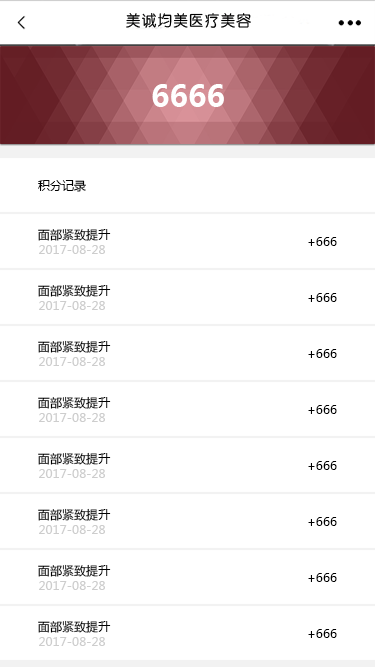
<style>
.page{position:relative;width:375px;height:667px;background:#ffffff}
.page>*{position:absolute;margin:0}
.t1{font:30px "MicrosoftYaHei-Bold";letter-spacing:0.005em;color:#ffffff}
.t2{font:12px "MicrosoftYaHei";letter-spacing:0.005em;color:#000000}
.t3{font:12px "MicrosoftYaHei";letter-spacing:0.005em;color:#cdcdcd}
</style>
<div class="page">
<p class="t1" style="left:152px;top:84px;width:72px;height:23px">6666</p>
<p class="t2" style="left:38px;top:180px;width:48px;height:12px">积分记录</p>
<p class="t2" style="left:38px;top:228px;width:73px;height:13px">面部紧致提升</p>
<p class="t3" style="left:39px;top:245px;width:66px;height:9px">2017-08-28</p>
<p class="t2" style="left:308px;top:237px;width:29px;height:9px">+666</p>
<p class="t2" style="left:38px;top:284px;width:73px;height:13px">面部紧致提升</p>
<p class="t2" style="left:308px;top:293px;width:29px;height:9px">+666</p>
<p class="t3" style="left:39px;top:301px;width:66px;height:9px">2017-08-28</p>
<p class="t2" style="left:38px;top:340px;width:73px;height:13px">面部紧致提升</p>
<p class="t2" style="left:308px;top:349px;width:29px;height:9px">+666</p>
<p class="t3" style="left:39px;top:357px;width:66px;height:9px">2017-08-28</p>
<p class="t2" style="left:38px;top:396px;width:73px;height:13px">面部紧致提升</p>
<p class="t3" style="left:39px;top:413px;width:66px;height:9px">2017-08-28</p>
<p class="t2" style="left:308px;top:405px;width:29px;height:9px">+666</p>
<p class="t2" style="left:38px;top:452px;width:73px;height:13px">面部紧致提升</p>
<p class="t2" style="left:308px;top:461px;width:29px;height:9px">+666</p>
<p class="t3" style="left:39px;top:469px;width:66px;height:9px">2017-08-28</p>
<p class="t2" style="left:38px;top:508px;width:73px;height:13px">面部紧致提升</p>
<p class="t2" style="left:308px;top:517px;width:29px;height:9px">+666</p>
<p class="t3" style="left:39px;top:525px;width:66px;height:9px">2017-08-28</p>
<p class="t2" style="left:38px;top:564px;width:73px;height:13px">面部紧致提升</p>
<p class="t3" style="left:39px;top:581px;width:66px;height:9px">2017-08-28</p>
<p class="t2" style="left:308px;top:573px;width:29px;height:9px">+666</p>
<p class="t2" style="left:38px;top:620px;width:73px;height:13px">面部紧致提升</p>
<p class="t2" style="left:308px;top:629px;width:29px;height:9px">+666</p>
<p class="t3" style="left:39px;top:637px;width:66px;height:9px">2017-08-28</p>
</div>
